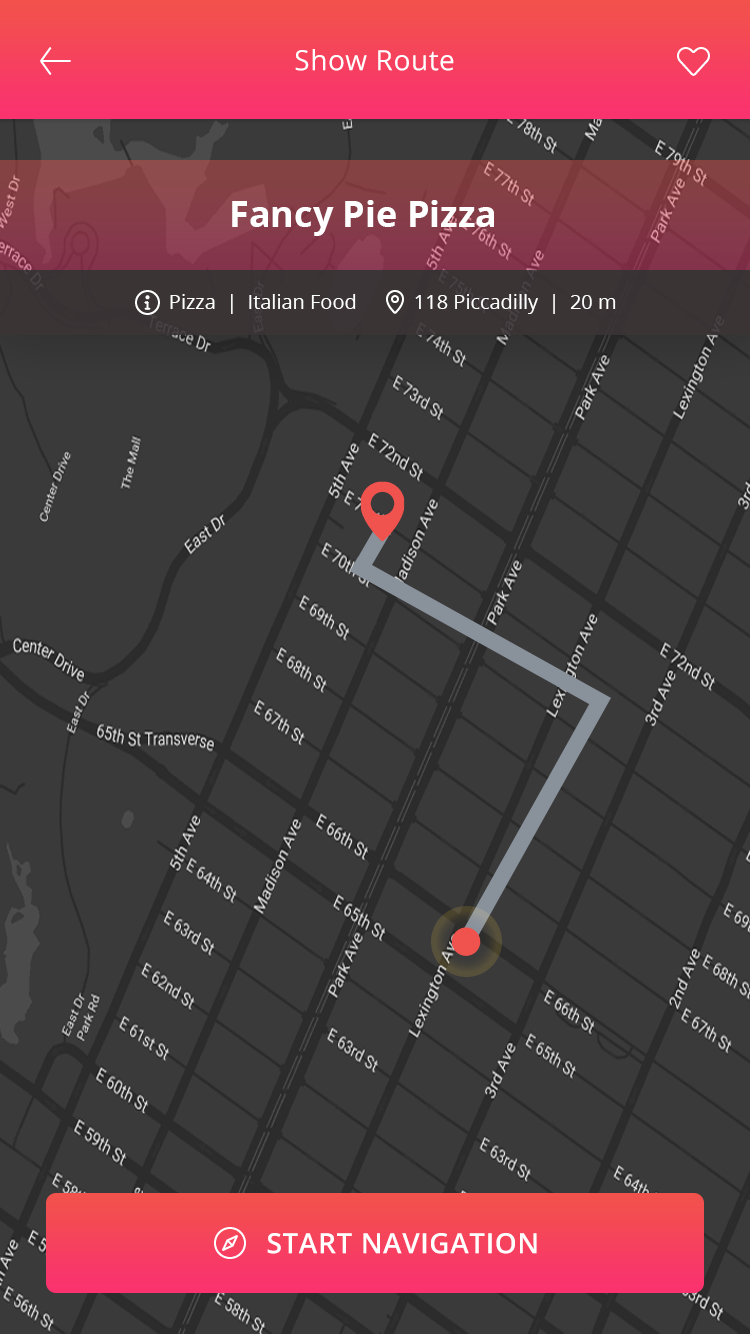
<style>
.page{position:relative;width:750px;height:1334px;background:#3a3a3a}
.page>*{position:absolute;margin:0}
.t1{font:28px "OpenSans";letter-spacing:0.02em;color:#ffffff}
.t2{font:36px "OpenSans-Bold";color:#ffffff}
.t3{font:20px "OpenSans";color:#ffffff}
.t4{font:28px "OpenSans-Semibold";letter-spacing:0.02em;color:#ffffff;text-transform:uppercase}
</style>
<div class="page">
<p class="t1" style="left:295px;top:49px;width:159px;height:22px">Show Route</p>
<p class="t2" style="left:232px;top:200px;width:262px;height:36px">Fancy Pie Pizza</p>
<p class="t3" style="left:170px;top:294px;width:186px;height:20px">Pizza  |  Italian Food</p>
<p class="t3" style="left:415px;top:294px;width:201px;height:20px">118 Piccadilly  |  20 m</p>
<p class="t4" style="left:267px;top:1233px;width:270px;height:21px">Start Navigation</p>
</div>
